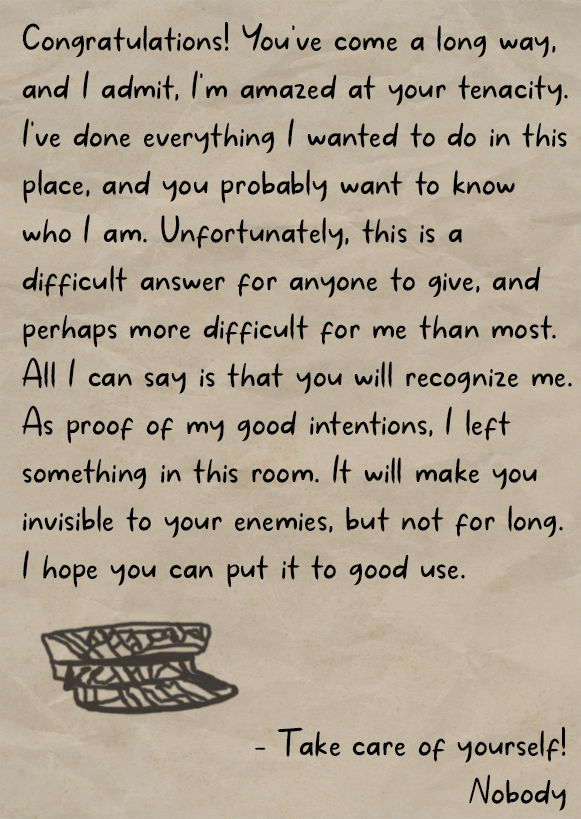
<style>
.page{position:relative;width:581px;height:819px}
.page>*{position:absolute;margin:0}
.t1{font:40px "MakanHatiCyrillicRegular";letter-spacing:0.01em;color:#000000}
</style>
<div class="page">
<p class="t1" style="left:22px;top:21px;width:550px;height:567px">Congratulations! You've come a long way, and I admit, I'm amazed at your tenacity. I've done everything I wanted to do in this place, and you probably want to know who I am. Unfortunately, this is a difficult answer for anyone to give, and perhaps more difficult for me than most. All I can say is that you will recognize me. As proof of my good intentions, I left something in this room. It will make you invisible to your enemies, but not for long. I hope you can put it to good use.</p>
<p class="t1" style="left:255px;top:726px;width:311px;height:85px;text-align:justify">- Take care of yourself!<br>Nobody</p>
</div>
